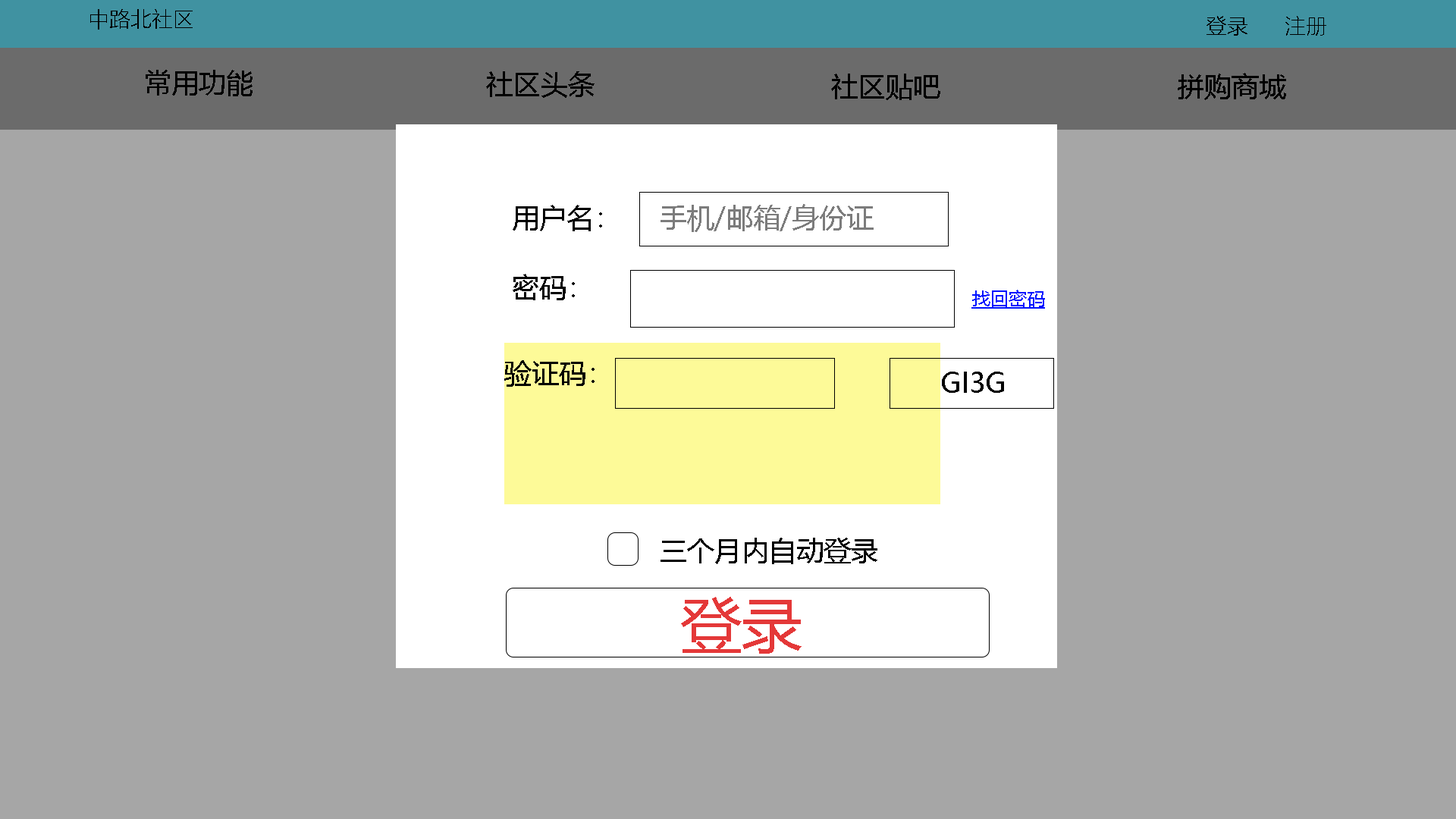
<style>
.page{position:relative;width:1456px;height:819px;background:#a6a6a6}
.page>*{position:absolute;margin:0}
.t1{font:21.2px "MicrosoftYaHeiLight";color:#000000}
.t2{font:27.3px "MicrosoftYaHei";color:#000000}
.t3{font:27.3px "MicrosoftYaHei";color:#7c7c7c}
.t4{font:18.2px "MicrosoftYaHei";color:#0012ff;text-decoration:underline}
.t5{font:60.7px "MicrosoftYaHei";color:#e43838}
</style>
<div class="page">
<p class="t1" style="left:90px;top:9px;width:103px;height:21px">中路北社区</p>
<p class="t1" style="left:1206px;top:16px;width:120px;height:20px">登录      注册</p>
<p class="t2" style="left:146px;top:70px;width:107px;height:26px">常用功能</p>
<p class="t2" style="left:486px;top:71px;width:109px;height:27px">社区头条</p>
<p class="t2" style="left:831px;top:74px;width:109px;height:26px">社区贴吧</p>
<p class="t2" style="left:1178px;top:73px;width:108px;height:27px">拼购商城</p>
<p class="t2" style="left:513px;top:205px;width:89px;height:26px">用户名：</p>
<p class="t3" style="left:660px;top:204px;width:214px;height:28px">手机/邮箱/身份证</p>
<p class="t2" style="left:513px;top:274px;width:62px;height:26px">密码：</p>
<p class="t4" style="left:971px;top:290px;width:74px;height:19px">找回密码</p>
<p class="t2" style="left:504px;top:360px;width:91px;height:27px">验证码：</p>
<p class="t2" style="left:942px;top:372px;width:62px;height:21px">GI3G</p>
<p class="t2" style="left:660px;top:538px;width:217px;height:26px">三个月内自动登录</p>
<p class="t5" style="left:681px;top:597px;width:121px;height:57px">登录</p>
</div>
